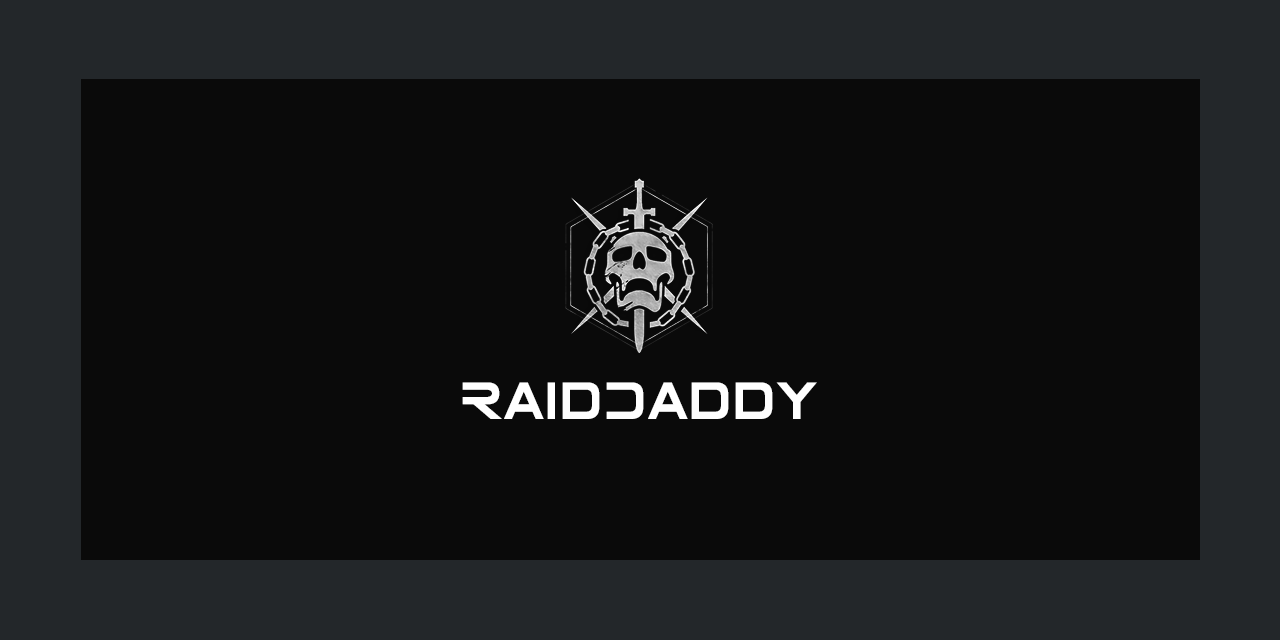
<style>
.page{position:relative;width:1280px;height:640px;background:#0a0a0a}
.page>*{position:absolute;margin:0}
.t1{font:50px "ElementalEnd";color:#ffffff}
</style>
<div class="page">
<p class="t1" style="left:462px;top:382px;width:355px;height:37px">RaidDaddy</p>
</div>
